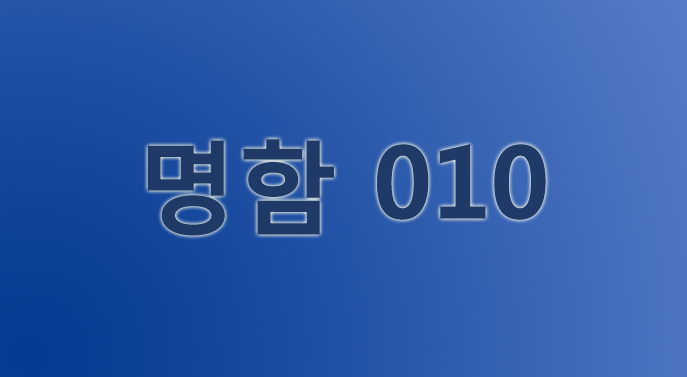
<style>
.page{position:relative;width:687px;height:377px}
.page>*{position:absolute;margin:0}
.t1{font:100px "MalgunGothicBold";letter-spacing:-0.02em;color:#1f3a66;font-weight:bold}
</style>
<div class="page">
<p class="t1" style="left:147px;top:139px;width:399px;height:97px">명함 010</p>
</div>
